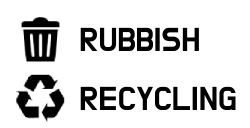
<style>
.page{position:relative;width:250px;height:128px;background:#ffffff}
.page>*{position:absolute;margin:0}
.t1{font:34px "DoHyeon-Regular";color:#000000}
</style>
<div class="page">
<p class="t1" style="left:80px;top:27px;width:119px;height:24px">RUBBISH</p>
<p class="t1" style="left:80px;top:86px;width:156px;height:24px">RECYCLING</p>
</div>
